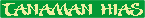
<style>
.page{position:relative;width:145px;height:18px;background:#029834}
.page>*{position:absolute;margin:0}
.t1{font:18.6px "SevenSwordsmenBB";color:#eeefa3}
</style>
<div class="page">
<p class="t1" style="left:2px;top:3px;width:141px;height:13px">tanaman hias</p>
</div>
